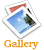
<style>
.page{position:relative;width:44px;height:50px;background:#ffffff}
.page>*{position:absolute;margin:0}
.t1{font:10px "KacstPoster";color:#ed9007}
</style>
<div class="page">
<p class="t1" style="left:4px;top:39px;width:35px;height:11px">Gallery</p>
</div>
